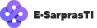
<style>
.page{position:relative;width:97px;height:28px;background:#ffffff}
.page>*{position:absolute;margin:0}
.t1{font:8.9px "Arial-Black";color:#2b2b2b;font-weight:bold}
</style>
<div class="page">
<p class="t1" style="left:34px;top:11px;width:60px;height:10px">E-SarprasTI</p>
</div>
